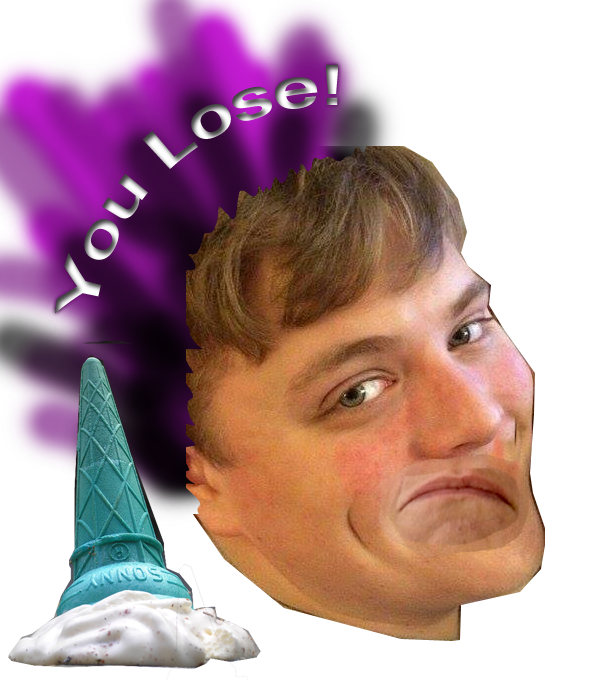
<style>
.page{position:relative;width:593px;height:680px;background:#ffffff}
.page>*{position:absolute;margin:0}
.t1{font:60px "Gautami-Bold"}
</style>
<div class="page">
<p class="t1" style="left:55px;top:64px;width:283px;height:250px;rotate:-40deg">You Lose!</p>
</div>
